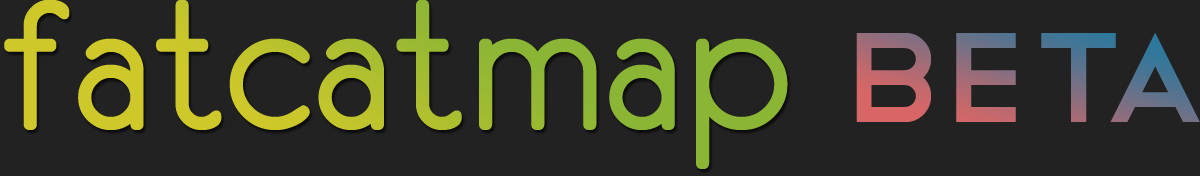
<style>
.page{position:relative;width:1200px;height:176px;background:#222222}
.page>*{position:absolute;margin:0}
.t1{font:208.3px "Eurofurenceregular"}
.t2{font:166.7px "Telegrafico"}
</style>
<div class="page">
<p class="t1" style="left:4px;top:0px;width:784px;height:169px">fatcatmap</p>
<p class="t2" style="left:856px;top:33px;width:344px;height:89px">beta</p>
</div>
